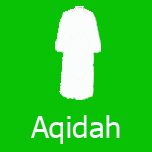
<style>
.page{position:relative;width:152px;height:152px;background:#0ac205}
.page>*{position:absolute;margin:0}
.t1{font:30px "Tahoma";color:#f8f9fc}
</style>
<div class="page">
<p class="t1" style="left:31px;top:115px;width:89px;height:29px">Aqidah</p>
</div>
